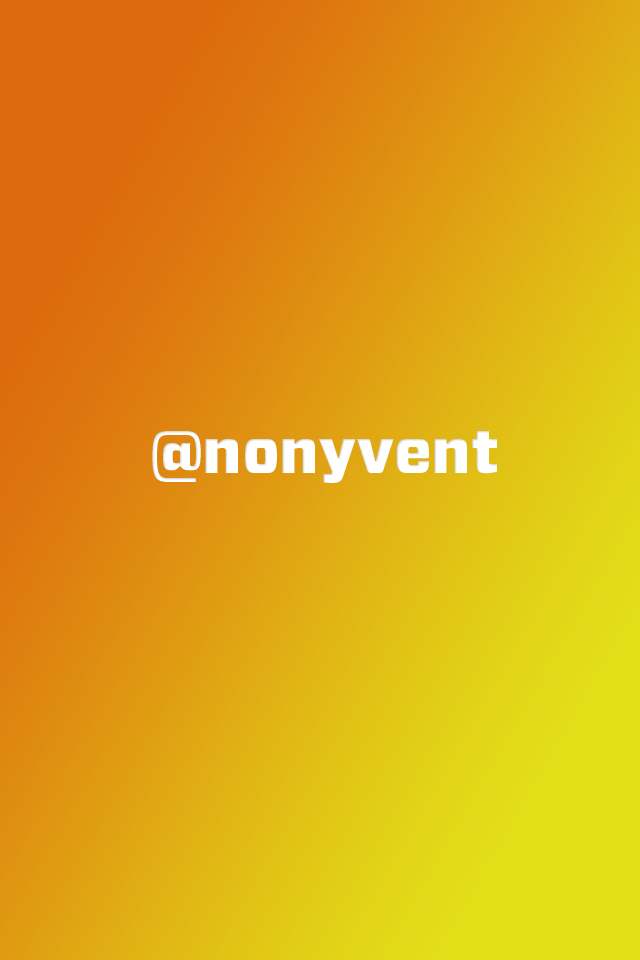
<style>
.page{position:relative;width:640px;height:960px}
.page>*{position:absolute;margin:0}
.t1{font:60px "VitesseSans-Black";color:#ffffff}
</style>
<div class="page">
<p class="t1" style="left:152px;top:431px;width:345px;height:52px">@nonyvent</p>
</div>
